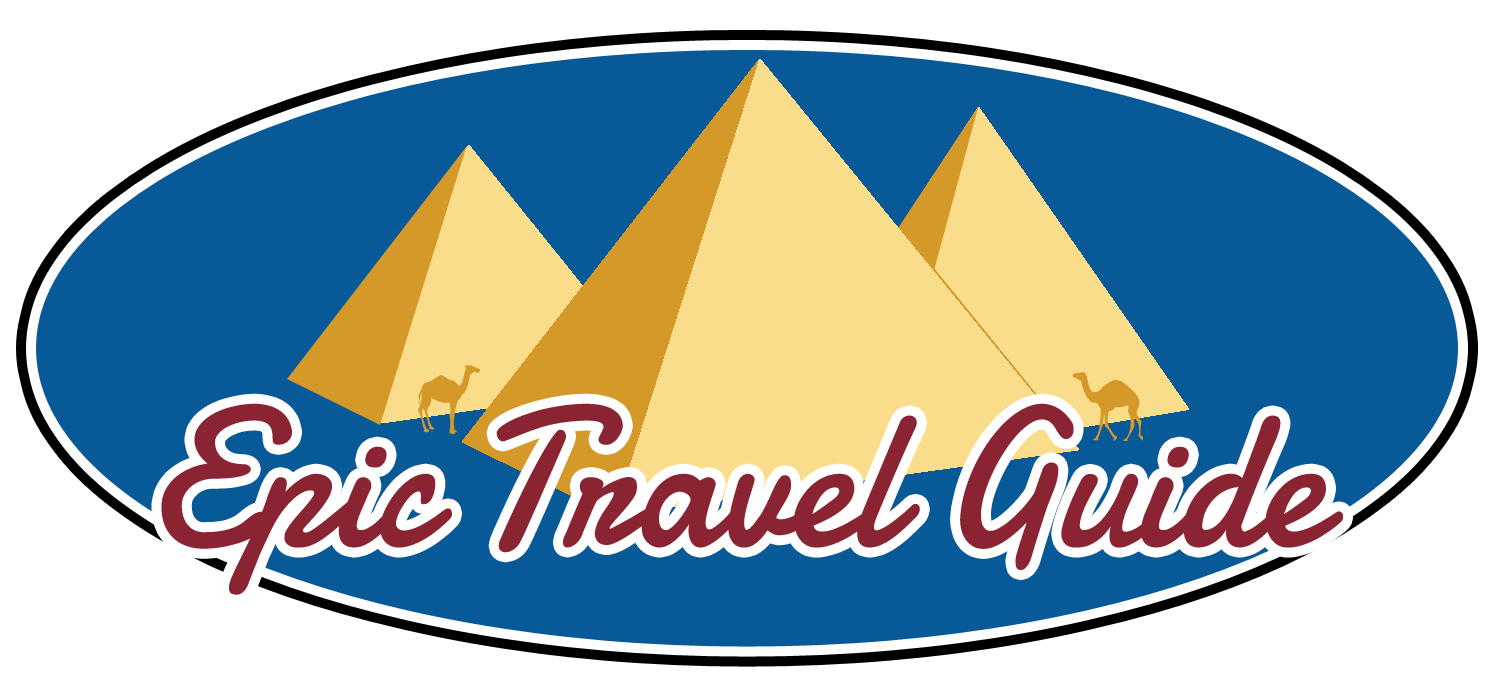
<style>
.page{position:relative;width:1500px;height:700px;background:#ffffff}
.page>*{position:absolute;margin:0}
.t1{font:200px "Damion";color:#8a2432;scale:0.89 1}
</style>
<div class="page">
<p class="t1" style="left:161px;top:403px;width:1182px;height:192px">Epic Travel Guide</p>
</div>
